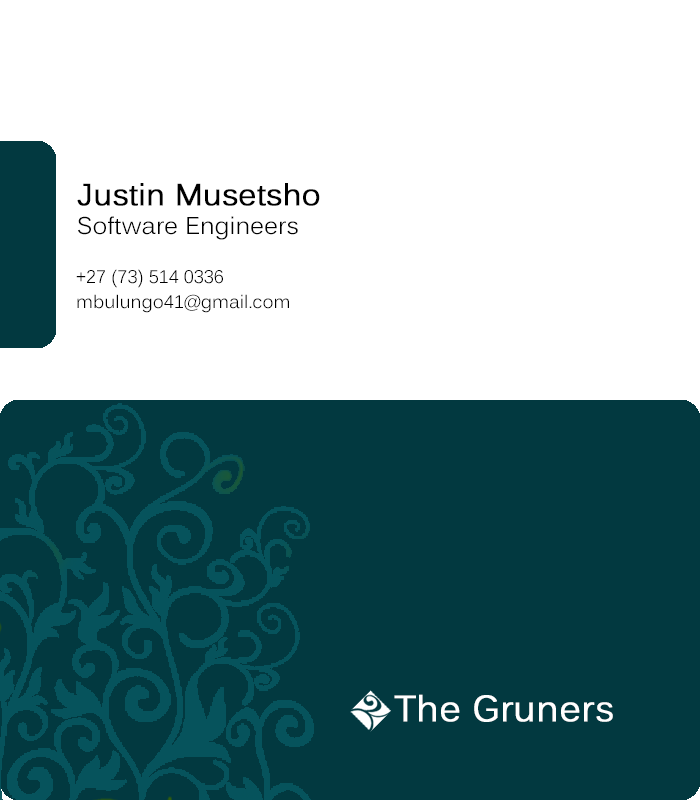
<style>
.page{position:relative;width:700px;height:800px;background:#ffffff}
.page>*{position:absolute;margin:0}
.t1{font:30px "Kalinga";color:#000000;font-weight:bold}
.t2{font:24px "Kalinga";color:#000000}
.t3{font:18px "Kalinga";color:#000000}
.t4{font:36px "Kalinga";color:#ffffff;font-weight:bold}
</style>
<div class="page">
<p class="t1" style="left:77px;top:183px;width:243px;height:23px">Justin Musetsho</p>
<p class="t2" style="left:78px;top:216px;width:220px;height:24px">Software Engineers</p>
<p class="t3" style="left:76px;top:269px;width:147px;height:19px">+27 (73) 514 0336</p>
<p class="t3" style="left:77px;top:294px;width:212px;height:19px">mbulungo41@gmail.com</p>
<p class="t4" style="left:394px;top:694px;width:219px;height:28px">The Gruners</p>
</div>
